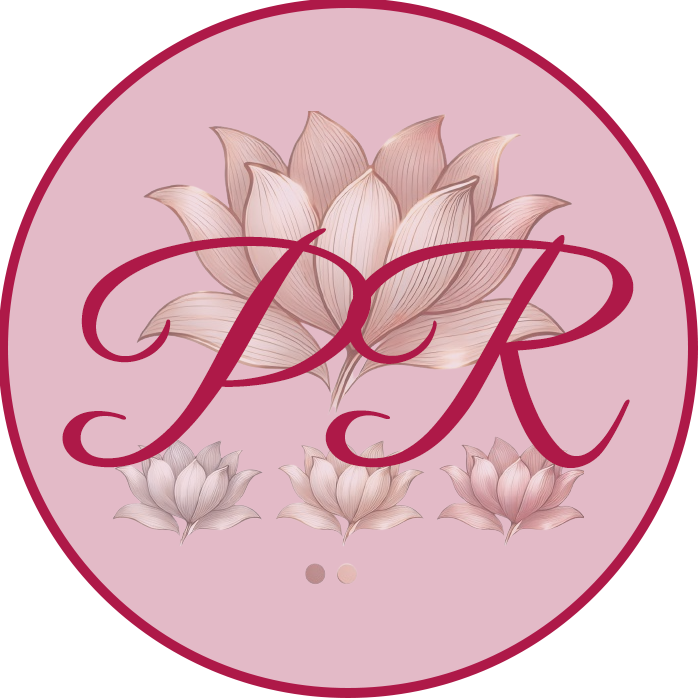
<style>
.page{position:relative;width:700px;height:700px;background:#e3bac7}
.page>*{position:absolute;margin:0}
.t1{font:280px "GreatVibes-Regular";color:#ae1948}
</style>
<div class="page">
<p class="t1" style="left:62px;top:228px;width:572px;height:240px">PR</p>
</div>
